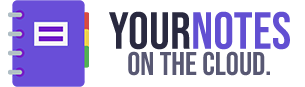
<style>
.page{position:relative;width:305px;height:87px;background:#ffffff}
.page>*{position:absolute;margin:0}
.t1{font:52.3px "BebasNeue-Regular";color:#624fd2}
.t2{font:52.3px "BebasNeue-Regular";color:#29293f}
.t3{font:32.7px "BebasNeue-Regular";color:#585873}
</style>
<div class="page">
<p class="t1" style="left:109px;top:11px;width:181px;height:39px"><span class="t2">Your</span>notes</p>
<p class="t3" style="left:128px;top:51px;width:142px;height:25px">on the cloud.</p>
</div>
